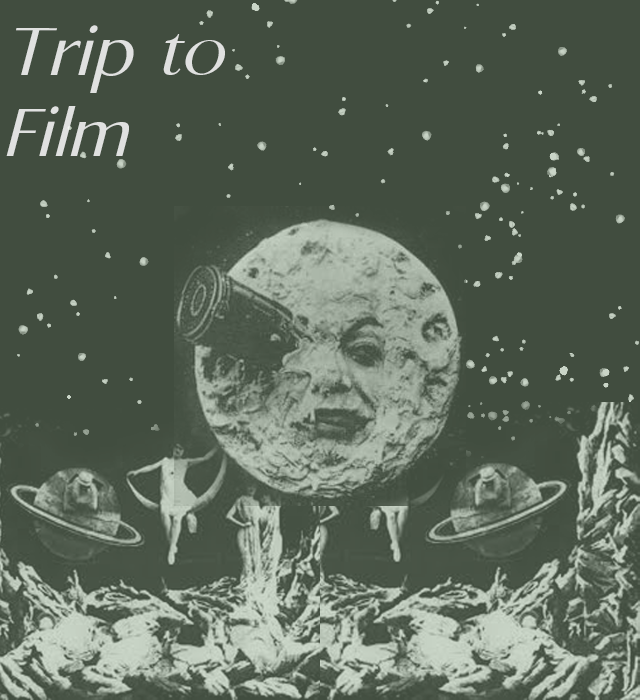
<style>
.page{position:relative;width:640px;height:700px;background:#414d3f}
.page>*{position:absolute;margin:0}
.t1{font:67.3px "APOLLO-Italic";letter-spacing:0.05em;color:#e0e1e0}
</style>
<div class="page">
<p class="t1" style="left:6px;top:25px;width:219px;height:131px">Trip to<br>Film</p>
</div>
